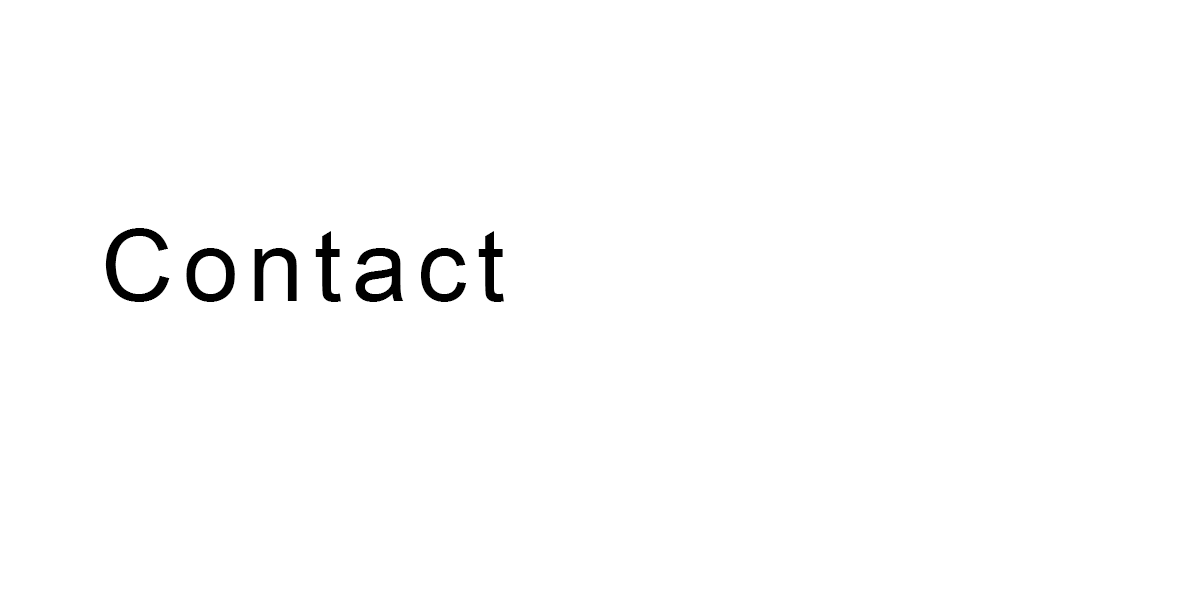
<style>
.page{position:relative;width:1200px;height:600px;background:#ffffff}
.page>*{position:absolute;margin:0}
.t1{font:100px "ArialMT";letter-spacing:0.1em;color:#000000}
</style>
<div class="page">
<p class="t1" style="left:105px;top:228px;width:399px;height:74px">Contact</p>
</div>
